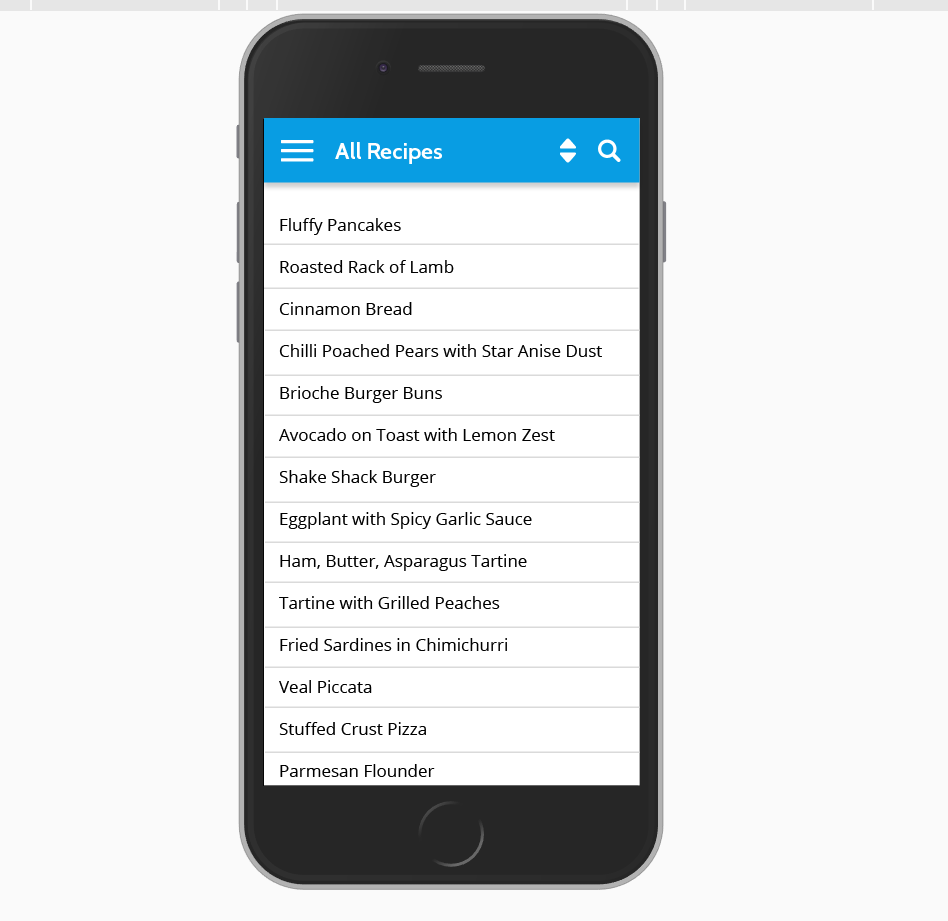
<style>
.page{position:relative;width:948px;height:921px;background:#fafafa}
.page>*{position:absolute;margin:0}
.t1{font:21.9px "Cabin-Bold";color:#ffffff;scale:1.05 1}
.t2{font:17px/42px "OpenSans";color:#000000}
</style>
<div class="page">
<p class="t1" style="left:335px;top:142px;width:107px;height:22px">All Recipes</p>
<p class="t2" style="left:279px;top:218px;width:323px;height:559px">Fluffy Pancakes<br>Roasted Rack of Lamb<br>Cinnamon Bread<br>Chilli Poached Pears with Star Anise Dust<br>Brioche Burger Buns<br>Avocado on Toast with Lemon Zest<br>Shake Shack Burger<br>Eggplant with Spicy Garlic Sauce<br>Ham, Butter, Asparagus Tartine<br>Tartine with Grilled Peaches<br>Fried Sardines in Chimichurri<br>Veal Piccata<br>Stuffed Crust Pizza<br>Parmesan Flounder</p>
</div>
